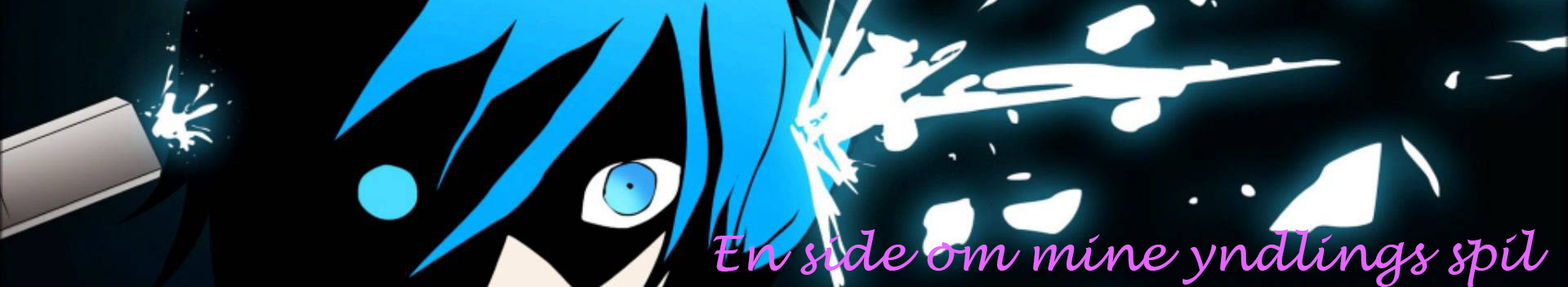
<style>
.page{position:relative;width:1568px;height:287px}
.page>*{position:absolute;margin:0}
.t1{font:49px "LucidaHandwriting-Italic";color:#e467ff}
</style>
<div class="page">
<p class="t1" style="left:713px;top:229px;width:836px;height:58px">En side om mine yndlings spil</p>
</div>
